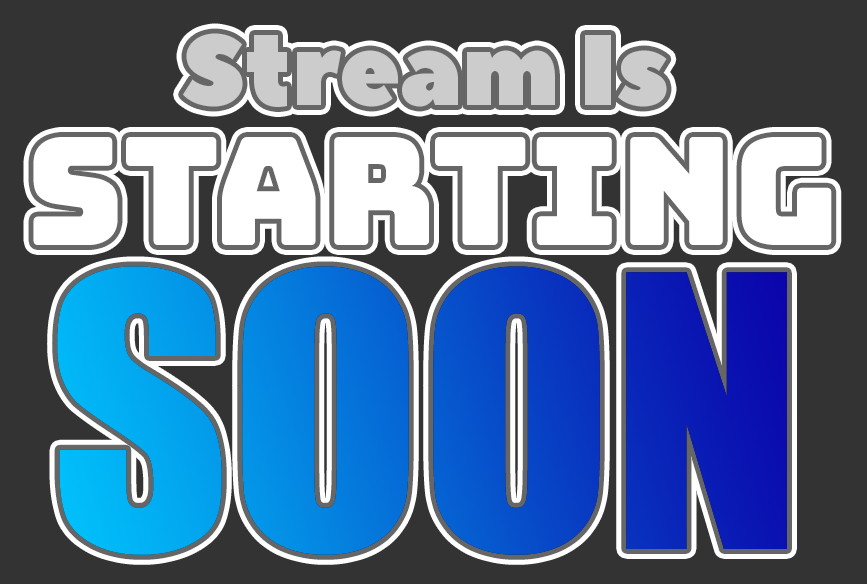
<style>
.page{position:relative;width:867px;height:584px;background:#333333}
.page>*{position:absolute;margin:0}
.t1{font:100px "PeaceSans";color:#cccccc}
.t2{font:150px "Bungee-Regular";color:#ffffff}
.t3{font:350px "Impact"}
</style>
<div class="page">
<p class="t1" style="left:183px;top:33px;width:484px;height:74px">Stream Is</p>
<p class="t2" style="left:33px;top:137px;width:799px;height:108px">Starting</p>
<p class="t3" style="left:57px;top:266px;width:730px;height:289px">SOON</p>
</div>
